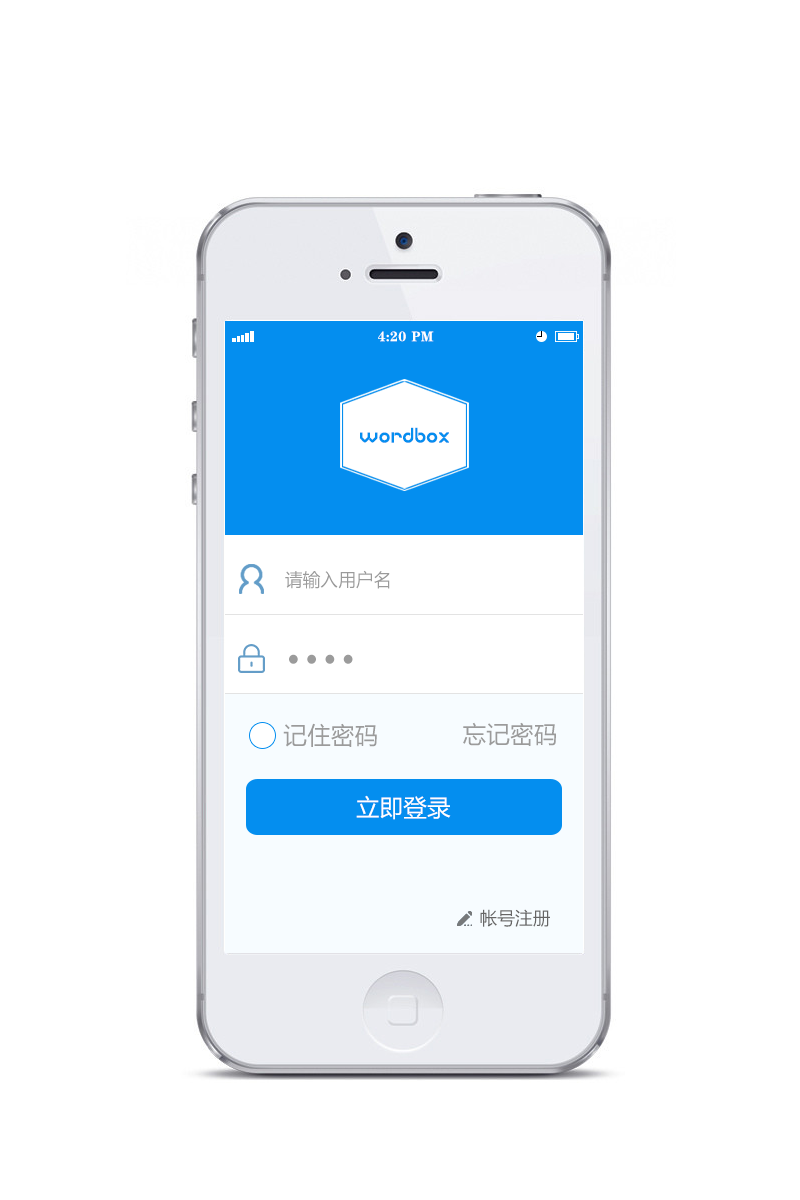
<style>
.page{position:relative;width:800px;height:1200px;background:#ffffff}
.page>*{position:absolute;margin:0}
.t1{font:14px "FZCSK--GBK1-0";letter-spacing:0.02em;color:#ffffff}
.t2{font:22.2px "BabyFace";color:#048eef}
.t3{font:18px "MicrosoftYaHei";letter-spacing:0.02em;color:#9b9b9b;scale:0.97 1}
.t4{font:72px "MicrosoftYaHei";letter-spacing:0.02em;color:#9b9b9b;scale:0.97 1}
.t5{font:24px "MicrosoftYaHei";letter-spacing:0.02em;color:#9b9b9b;scale:0.97 1}
.t6{font:24px "MicrosoftYaHei";letter-spacing:0.02em;color:#ffffff;scale:0.97 1}
.t7{font:18px "MicrosoftYaHei";letter-spacing:0.02em;color:#666565;scale:0.97 1}
</style>
<div class="page">
<p class="t1" style="left:378px;top:331px;width:28px;height:11px">4:20</p>
<p class="t1" style="left:411px;top:331px;width:23px;height:11px">PM</p>
<p class="t2" style="left:360px;top:427px;width:89px;height:16px">wordbox</p>
<p class="t3" style="left:285px;top:570px;width:105px;height:19px">请输入用户名</p>
<p class="t4" style="left:289px;top:654px;width:64px;height:10px">····</p>
<p class="t5" style="left:283px;top:723px;width:94px;height:24px">记住密码</p>
<p class="t5" style="left:463px;top:722px;width:93px;height:24px">忘记密码</p>
<p class="t6" style="left:356px;top:795px;width:95px;height:25px">立即登录</p>
<p class="t7" style="left:480px;top:909px;width:70px;height:18px">帐号注册</p>
</div>
